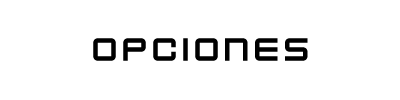
<style>
.page{position:relative;width:400px;height:100px;background:#ffffff}
.page>*{position:absolute;margin:0}
.t1{font:36px "KenVector-Future";color:#000000}
</style>
<div class="page">
<p class="t1" style="left:93px;top:38px;width:215px;height:23px">opciones</p>
</div>
